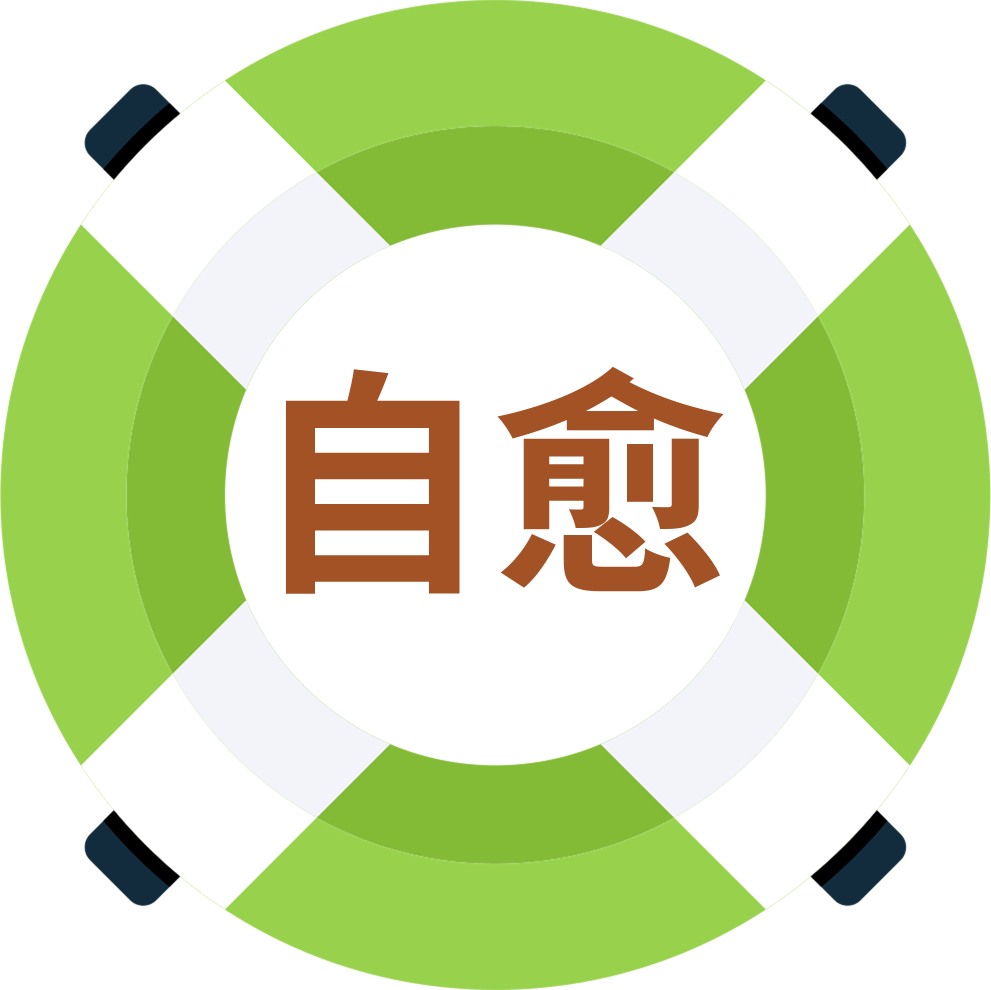
<style>
.page{position:relative;width:991px;height:990px;background:#ffffff}
.page>*{position:absolute;margin:0}
.t1{font:240px "NotoSansHans-Bold";color:#a35226}
</style>
<div class="page">
<p class="t1" style="left:285px;top:366px;width:439px;height:228px">自愈</p>
</div>
